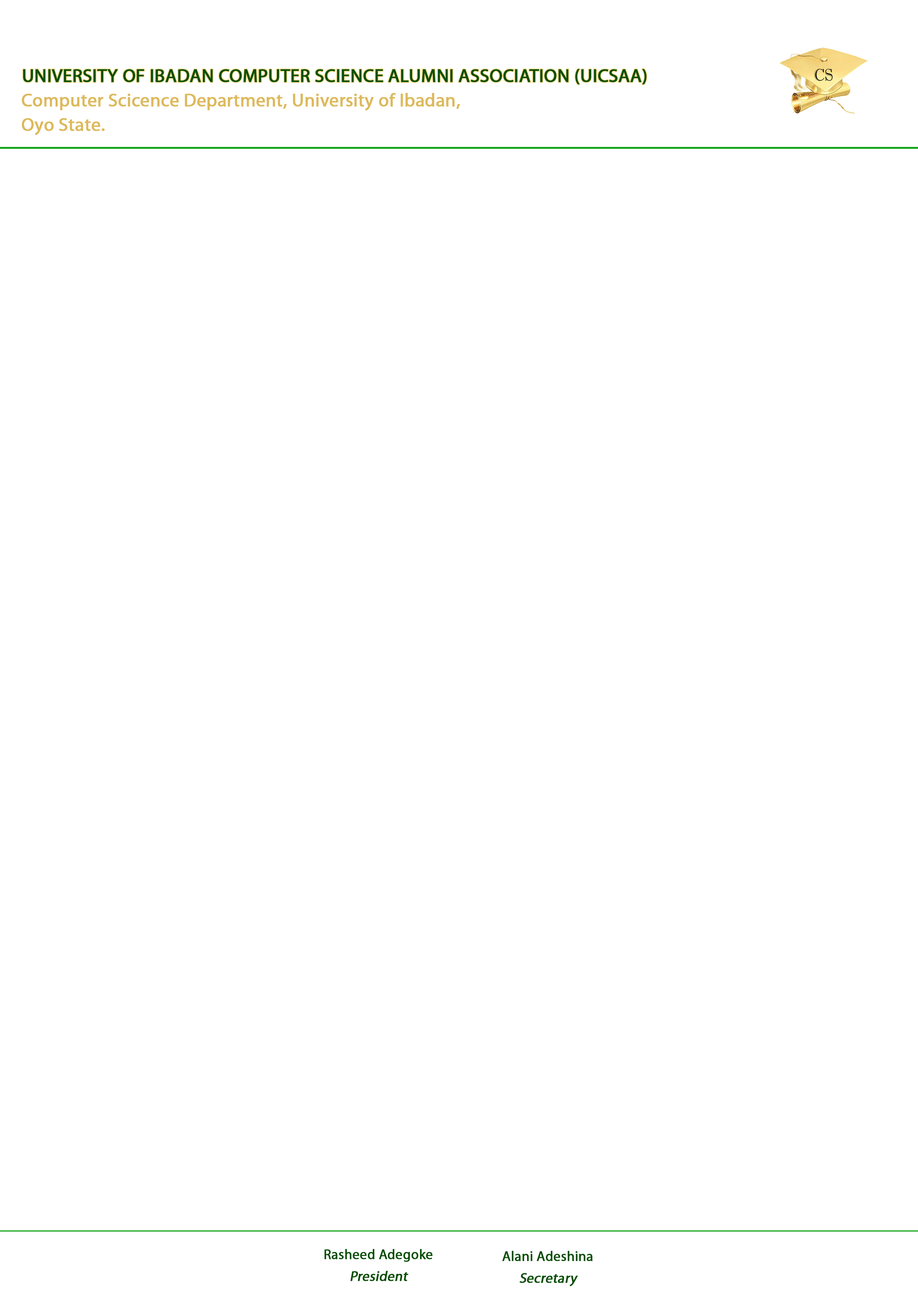
<style>
.page{position:relative;width:918px;height:1299px;background:#ffffff}
.page>*{position:absolute;margin:0}
.t1{font:18.5px "MyriadPro-Regular";color:#064e0a;font-weight:bold}
.t2{font:18.5px/24.7px "MyriadPro-Regular";color:#ddb95c;font-weight:bold}
.t3{font:13.9px/21.6px "MyriadPro-Regular";color:#084c03;font-weight:bold}
.t4{font:13.9px/21.6px "MyriadPro-Regular";color:#084c03;font-weight:bold;font-style:italic}
</style>
<div class="page">
<p class="t1" style="left:23px;top:69px;width:624px;height:15px">UNIVERSITY OF IBADAN COMPUTER SCIENCE ALUMNI ASSOCIATION (UICSAA)</p>
<p class="t2" style="left:22px;top:93px;width:438px;height:42px">Computer Scicence Department, University of Ibadan,<br>Oyo State.</p>
<p class="t3" style="left:324px;top:1249px;width:109px;height:32px;text-align:center">Rasheed Adegoke<br><span class="t4">President</span></p>
<p class="t3" style="left:502px;top:1251px;width:91px;height:35px;text-align:center">Alani Adeshina<br><span class="t4">Secretary</span></p>
</div>
